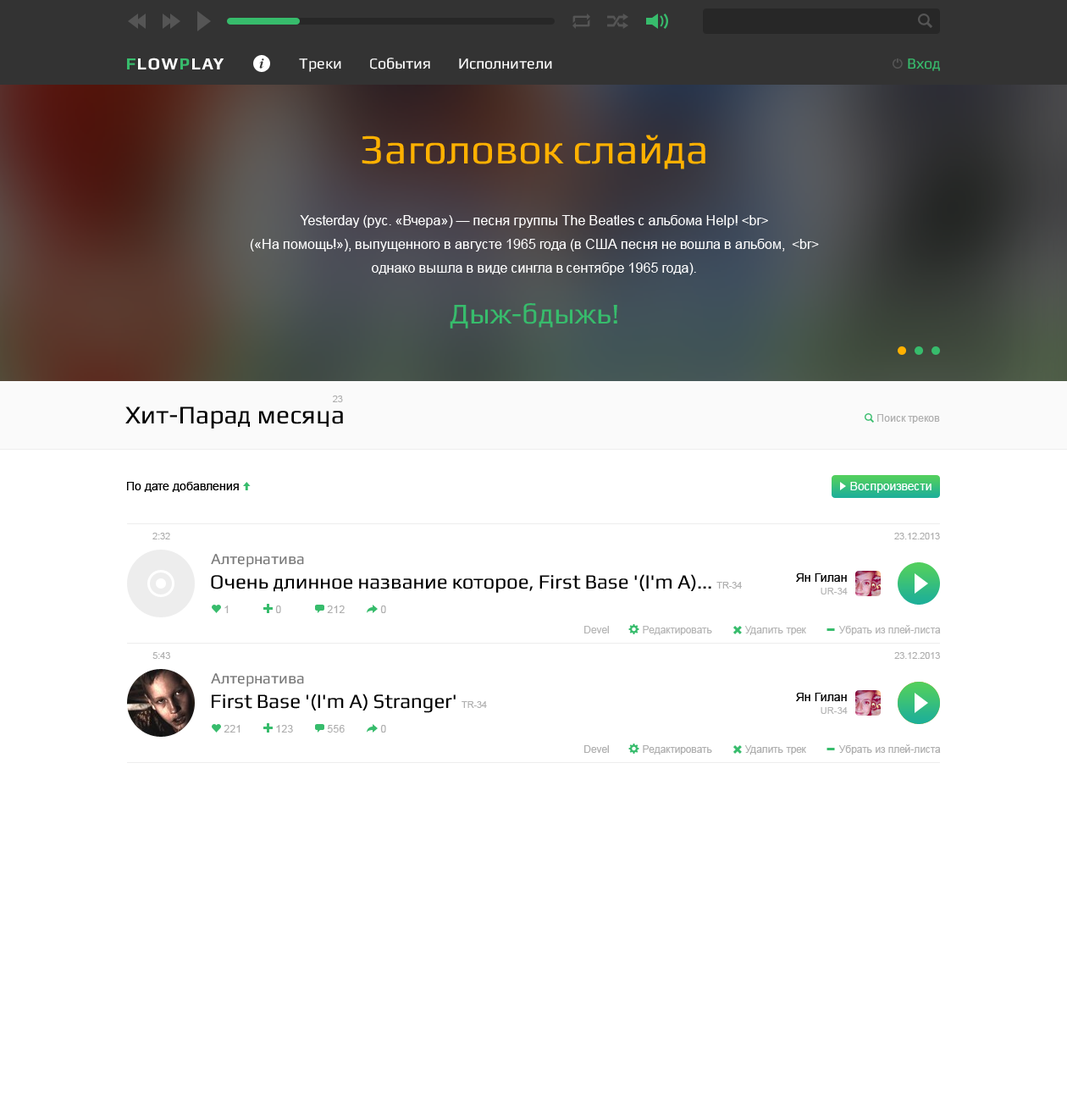
<style>
.page{position:relative;width:1067px;height:1117px;background:#ffffff}
.page>*{position:absolute;margin:0}
.t1{font:41.8px "Play";color:#ffb100}
.t2{font:13.6px/23.7px "ArialMT";color:#ffffff}
.t3{font:28.8px/50.8px "Play";color:#37bc6c}
.t4{font:9.3px "ArialMT";color:#afafaf}
.t5{font:25.4px "Play";color:#000000}
.t6{font:10.2px "ArialMT";color:#afafaf}
.t7{font:11.9px "ArialMT";color:#000000}
.t8{font:11.9px "ArialMT";color:#ffffff}
.t9{font:15.2px "Play";color:#777777}
.t10{font:20.3px "Play";color:#000000}
.t11{font:11.9px/12.7px "ArialMT";color:#000000}
.t12{font:9.3px/12.7px "ArialMT";color:#b5b5b5}
.t13{font:10.2px "ArialMT";color:#b5b5b5}
</style>
<div class="page">
<p class="t1" style="left:362px;top:135px;width:344px;height:34px">Заголовок слайда</p>
<p class="t2" style="left:250px;top:215px;width:569px;height:114px;text-align:center">Yesterday (рус. «Вчера») — песня группы The Beatles с альбома Help! &lt;br&gt;<br>(«На помощь!»), выпущенного в августе 1965 года (в США песня не вошла в альбом,  &lt;br&gt;<br>однако вышла в виде сингла в сентябре 1965 года). <br><span class="t3">Дыж-бдыжь!</span></p>
<p class="t4" style="left:333px;top:396px;width:10px;height:6px">23</p>
<p class="t5" style="left:125px;top:407px;width:218px;height:22px">Хит-Парад месяца</p>
<p class="t6" style="left:878px;top:414px;width:62px;height:10px">Поиск треков</p>
<p class="t7" style="left:127px;top:482px;width:112px;height:10px">По дате добавления</p>
<p class="t8" style="left:850px;top:482px;width:82px;height:11px">Воспроизвести</p>
<p class="t4" style="left:152px;top:533px;width:18px;height:7px">2:32</p>
<p class="t4" style="left:894px;top:533px;width:46px;height:7px">23.12.2013</p>
<p class="t9" style="left:211px;top:554px;width:93px;height:14px">Алтернатива</p>
<p class="t10" style="left:211px;top:574px;width:531px;height:19px">Очень длинное название которое, First Base '(I'm A)... <span class="t4">TR-34</span></p>
<p class="t11" style="left:796px;top:573px;width:52px;height:22px;text-align:right">Ян Гилан<br><span class="t12">UR-34</span></p>
<p class="t6" style="left:224px;top:606px;width:5px;height:7px">1</p>
<p class="t6" style="left:275px;top:606px;width:6px;height:7px">0</p>
<p class="t6" style="left:327px;top:606px;width:18px;height:7px">212</p>
<p class="t6" style="left:380px;top:606px;width:6px;height:7px">0</p>
<p class="t13" style="left:584px;top:625px;width:357px;height:10px">Devel           Редактировать           Удалить трек           Убрать из плей-листа</p>
<p class="t4" style="left:152px;top:652px;width:18px;height:7px">5:43</p>
<p class="t4" style="left:894px;top:652px;width:46px;height:7px">23.12.2013</p>
<p class="t9" style="left:211px;top:673px;width:93px;height:14px">Алтернатива</p>
<p class="t10" style="left:212px;top:694px;width:275px;height:19px">First Base '(I'm A) Stranger' <span class="t4">TR-34</span></p>
<p class="t11" style="left:796px;top:693px;width:52px;height:21px;text-align:right">Ян Гилан<br><span class="t12">UR-34</span></p>
<p class="t6" style="left:224px;top:725px;width:17px;height:8px">221</p>
<p class="t6" style="left:276px;top:725px;width:17px;height:8px">123</p>
<p class="t6" style="left:327px;top:725px;width:18px;height:8px">556</p>
<p class="t6" style="left:380px;top:725px;width:6px;height:8px">0</p>
<p class="t6" style="left:584px;top:745px;width:357px;height:10px">Devel           Редактировать           Удалить трек           Убрать из плей-листа</p>
</div>
